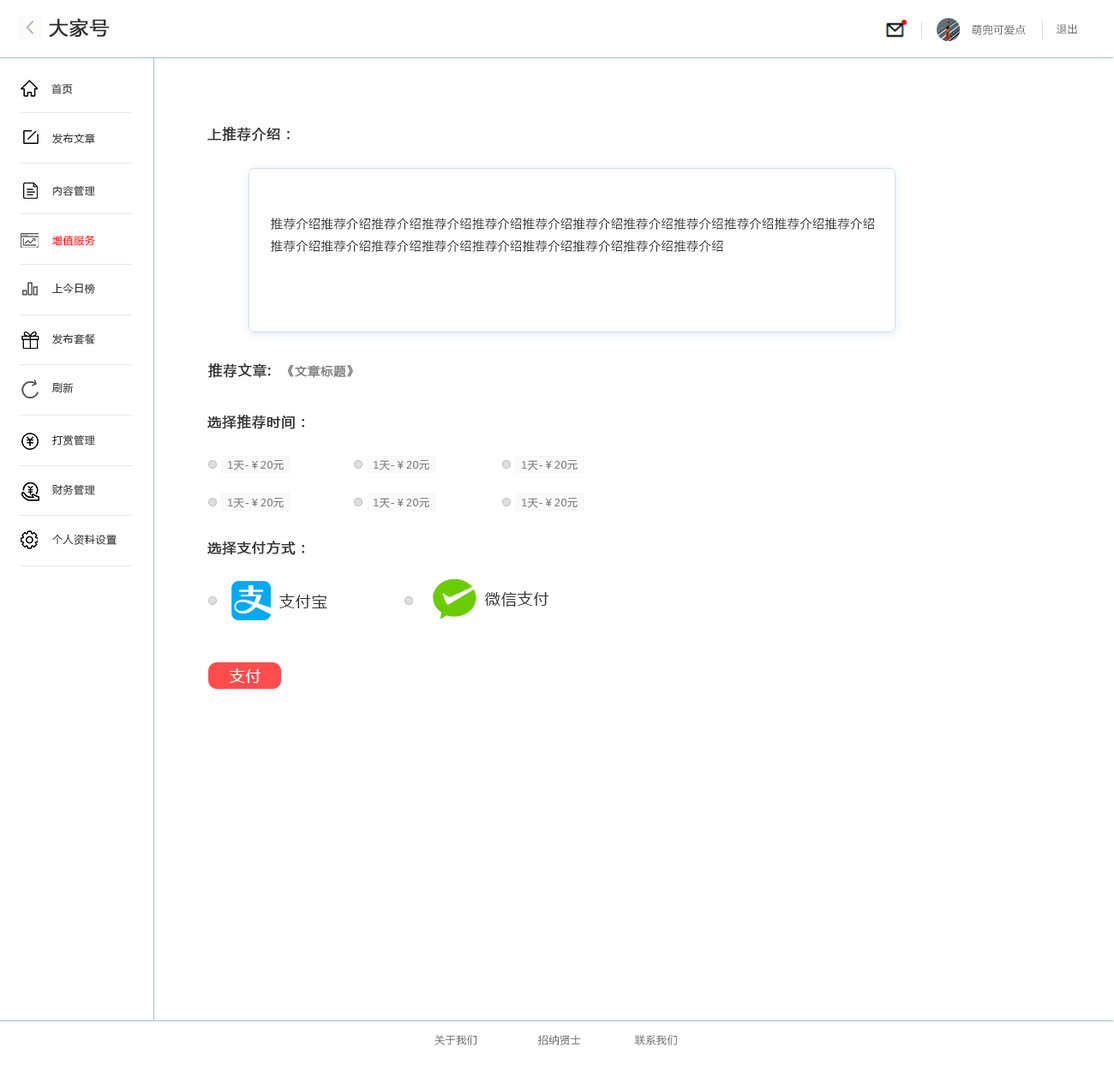
<style>
.page{position:relative;width:1114px;height:1071px;background:#ffffff}
.page>*{position:absolute;margin:0}
.t1{font:18.8px "MicrosoftYaHei";letter-spacing:0.05em;color:#333333;font-weight:bold}
.t2{font:10.3px "MicrosoftYaHei";letter-spacing:0.05em;color:#666666}
.t3{font:10.3px "MicrosoftYaHei";letter-spacing:0.05em;color:#333333}
.t4{font:13.7px "MicrosoftYaHei";letter-spacing:0.05em;color:#333333;font-weight:bold}
.t5{font:12px/5.1px "MicrosoftYaHei";letter-spacing:0.05em;color:#333333}
.t6{font:10.3px "MicrosoftYaHei";letter-spacing:0.05em;color:#ff0000}
.t7{font:12px "MicrosoftYaHei";letter-spacing:0.05em;color:#808080;font-weight:bold}
.t8{font:10.3px "MicrosoftYaHei";letter-spacing:0.05em;color:#808080}
.t9{font:15.4px "MicrosoftYaHei";letter-spacing:0.05em;color:#333333}
.t10{font:15.4px "MicrosoftYaHei";letter-spacing:0.05em;color:#ffffff}
</style>
<div class="page">
<p class="t1" style="left:49px;top:18px;width:60px;height:20px">大家号</p>
<p class="t2" style="left:971px;top:25px;width:54px;height:10px">萌兜可爱点</p>
<p class="t2" style="left:1056px;top:24px;width:21px;height:10px">退出</p>
<p class="t3" style="left:51px;top:83px;width:22px;height:11px">首页</p>
<p class="t3" style="left:52px;top:133px;width:43px;height:11px">发布文章</p>
<p class="t4" style="left:207px;top:127px;width:83px;height:14px">上推荐介绍：</p>
<p class="t3" style="left:53px;top:185px;width:42px;height:11px">内容管理</p>
<p class="t5" style="left:271px;top:218px;width:603px;height:34px">推荐介绍推荐介绍推荐介绍推荐介绍推荐介绍推荐介绍推荐介绍推荐介绍推荐介绍推荐介绍推荐介绍推荐介绍<br>推荐介绍推荐介绍推荐介绍推荐介绍推荐介绍推荐介绍推荐介绍推荐介绍推荐介绍</p>
<p class="t6" style="left:52px;top:235px;width:43px;height:11px">增值服务</p>
<p class="t3" style="left:52px;top:283px;width:43px;height:11px">上今日榜</p>
<p class="t3" style="left:52px;top:333px;width:43px;height:11px">发布套餐</p>
<p class="t7" style="left:208px;top:363px;width:145px;height:15px"><span class="t4">推荐文章:  </span>《文章标题》</p>
<p class="t3" style="left:52px;top:383px;width:22px;height:10px">刷新</p>
<p class="t4" style="left:207px;top:415px;width:98px;height:14px">选择推荐时间：</p>
<p class="t3" style="left:52px;top:434px;width:43px;height:11px">打赏管理</p>
<p class="t8" style="left:228px;top:460px;width:56px;height:10px">1天-￥20元</p>
<p class="t8" style="left:373px;top:460px;width:56px;height:10px">1天-￥20元</p>
<p class="t8" style="left:522px;top:460px;width:55px;height:10px">1天-￥20元</p>
<p class="t3" style="left:52px;top:484px;width:43px;height:11px">财务管理</p>
<p class="t8" style="left:228px;top:498px;width:56px;height:10px">1天-￥20元</p>
<p class="t8" style="left:373px;top:498px;width:56px;height:10px">1天-￥20元</p>
<p class="t8" style="left:522px;top:498px;width:55px;height:10px">1天-￥20元</p>
<p class="t3" style="left:52px;top:534px;width:65px;height:11px">个人资料设置</p>
<p class="t4" style="left:207px;top:541px;width:98px;height:14px">选择支付方式：</p>
<p class="t9" style="left:279px;top:594px;width:48px;height:14px">支付宝</p>
<p class="t9" style="left:485px;top:591px;width:63px;height:15px">微信支付</p>
<p class="t10" style="left:229px;top:668px;width:31px;height:15px">支付</p>
<p class="t2" style="left:434px;top:1035px;width:243px;height:10px">关于我们                 招纳贤士               联系我们</p>
</div>
